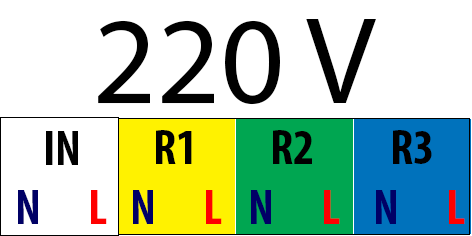
<style>
.page{position:relative;width:472px;height:236px;background:#ffffff}
.page>*{position:absolute;margin:0}
.t1{font:125px "MyriadPro-Regular";color:#000000}
.t2{font:12px "MyriadPro-BoldCond";color:#000000}
.t3{font:12px "MyriadPro-BoldCond";color:#000066}
.t4{font:12px "MyriadPro-BoldCond";color:#ff0000}
</style>
<div class="page">
<p class="t1" style="left:98px;top:19px;width:278px;height:86px">220 V</p>
<p class="t2" style="left:46px;top:131px;width:32px;height:34px">IN</p>
<p class="t2" style="left:156px;top:130px;width:36px;height:34px">R1</p>
<p class="t2" style="left:273px;top:130px;width:39px;height:34px">R2</p>
<p class="t2" style="left:393px;top:130px;width:39px;height:34px">R3</p>
<p class="t3" style="left:18px;top:190px;width:89px;height:34px">N      <span class="t4">L</span></p>
<p class="t3" style="left:133px;top:190px;width:89px;height:34px">N      <span class="t4">L</span></p>
<p class="t3" style="left:251px;top:190px;width:89px;height:34px">N      <span class="t4">L</span></p>
<p class="t3" style="left:376px;top:190px;width:89px;height:34px">N      <span class="t4">L</span></p>
</div>
